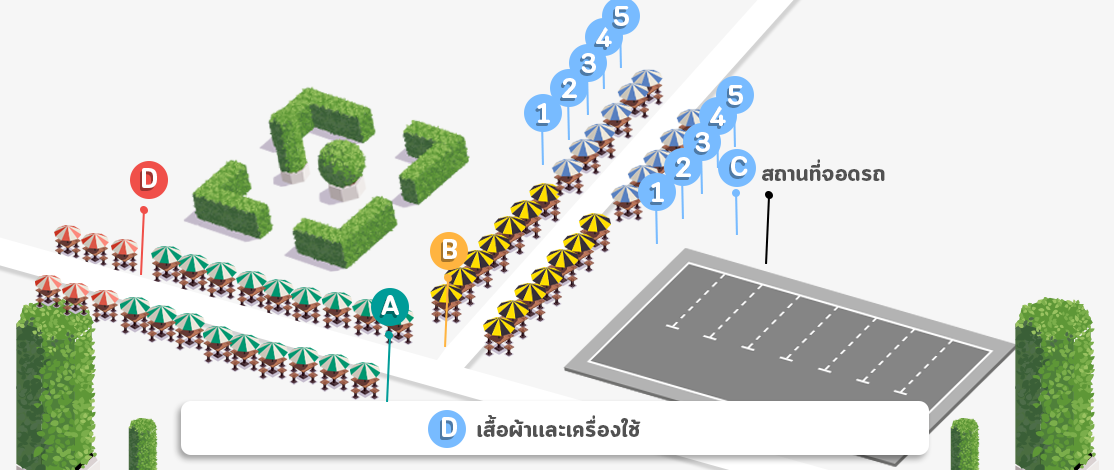
<style>
.page{position:relative;width:1114px;height:470px;background:#f6f6f6}
.page>*{position:absolute;margin:0}
.t1{font:27.5px "CloudSoft-Bold";color:#ffffff}
.t2{font:24px "CloudSoft-Bold";color:#525252}
</style>
<div class="page">
<p class="t1" style="left:614px;top:6px;width:15px;height:20px">5</p>
<p class="t1" style="left:596px;top:27px;width:16px;height:20px">4</p>
<p class="t1" style="left:581px;top:53px;width:15px;height:20px">3</p>
<p class="t1" style="left:562px;top:78px;width:15px;height:20px">2</p>
<p class="t1" style="left:728px;top:85px;width:15px;height:20px">5</p>
<p class="t1" style="left:537px;top:103px;width:13px;height:20px">1</p>
<p class="t1" style="left:710px;top:106px;width:16px;height:20px">4</p>
<p class="t1" style="left:695px;top:132px;width:15px;height:20px">3</p>
<p class="t1" style="left:676px;top:157px;width:15px;height:20px">2</p>
<p class="t1" style="left:731px;top:156px;width:17px;height:20px">C</p>
<p class="t2" style="left:762px;top:159px;width:123px;height:22px">สถานที่จอดรถ</p>
<p class="t1" style="left:142px;top:168px;width:15px;height:20px">D</p>
<p class="t1" style="left:651px;top:182px;width:13px;height:20px">1</p>
<p class="t1" style="left:443px;top:239px;width:14px;height:20px">B</p>
<p class="t1" style="left:381px;top:295px;width:18px;height:20px">A</p>
<p class="t1" style="left:442px;top:417px;width:15px;height:20px">D</p>
<p class="t2" style="left:477px;top:415px;width:164px;height:22px">เสื้อผ้าเเละเครื่องใช้</p>
</div>
